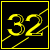
<style>
.page{position:relative;width:50px;height:50px;background:#000000}
.page>*{position:absolute;margin:0}
.t1{font:25px "ABitEmpty";color:#ffff00}
</style>
<div class="page">
<p class="t1" style="left:7px;top:14px;width:36px;height:22px">32</p>
</div>
